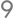
<style>
.page{position:relative;width:14px;height:19px;background:#ffffff}
.page>*{position:absolute;margin:0}
.t1{font:24.9px "GoogleSansDisplay-Regular";color:#757575}
</style>
<div class="page">
<p class="t1" style="left:1px;top:0px;width:12px;height:19px">9</p>
</div>
